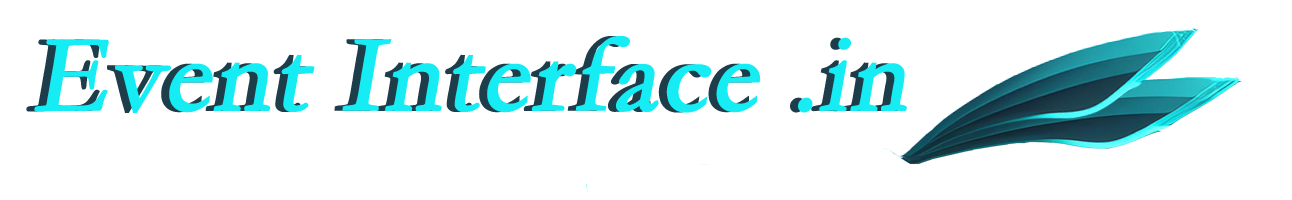
<style>
.page{position:relative;width:1292px;height:200px;background:#ffffff}
.page>*{position:absolute;margin:0}
.t1{font:110px "Garamond";letter-spacing:0.01em;font-weight:bold;font-style:italic}
.t2{font:110px "Garamond";letter-spacing:0.01em;color:#16ecf3;font-weight:bold;font-style:italic}
</style>
<div class="page">
<p class="t1" style="left:26px;top:36px;width:873px;height:77px">Event Interface .in</p>
<p class="t2" style="left:34px;top:36px;width:873px;height:77px">Event Interface .in</p>
</div>
